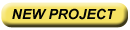
<style>
.page{position:relative;width:130px;height:30px;background:#f5e262}
.page>*{position:absolute;margin:0}
.t1{font:14px "Arial-BoldItalicMT";color:#040404}
</style>
<div class="page">
<p class="t1" style="left:12px;top:8px;width:104px;height:12px">NEW PROJECT</p>
</div>
